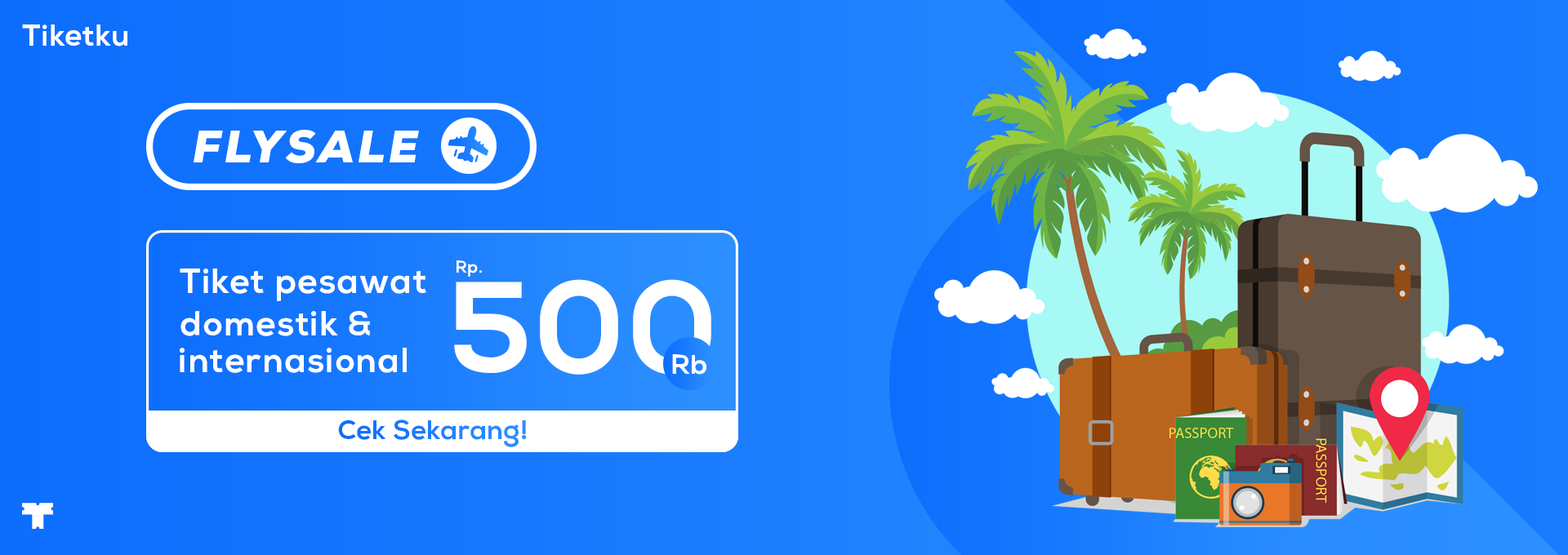
<style>
.page{position:relative;width:1568px;height:555px}
.page>*{position:absolute;margin:0}
.t1{font:30px "Nexa-XBold";letter-spacing:0.01em;color:#ffffff}
.t2{font:45px "Nexa-BlackItalic";letter-spacing:0.075em;color:#ffffff}
.t3{font:34.6px "Nexa-XBold";letter-spacing:0.025em;color:#ffffff}
.t4{font:16.7px "Nexa-XBold";letter-spacing:0.025em;color:#ffffff}
.t5{font:129px "Nexa-XBold";letter-spacing:0.01em;color:#ffffff}
.t6{font:27px "Nexa-XBold";letter-spacing:0.01em;color:#ffffff}
.t7{font:26.8px "Nexa-XBold";letter-spacing:0.01em;color:#1d7efe}
</style>
<div class="page">
<p class="t1" style="left:22px;top:24px;width:105px;height:23px">Tiketku</p>
<p class="t2" style="left:194px;top:130px;width:225px;height:33px">FLYSALE</p>
<p class="t3" style="left:180px;top:269px;width:246px;height:32px">Tiket pesawat</p>
<p class="t4" style="left:457px;top:261px;width:25px;height:16px">Rp.</p>
<p class="t5" style="left:454px;top:279px;width:257px;height:96px">500</p>
<p class="t3" style="left:180px;top:311px;width:190px;height:25px">domestik &amp;</p>
<p class="t3" style="left:180px;top:348px;width:227px;height:25px">internasional</p>
<p class="t6" style="left:672px;top:354px;width:34px;height:21px">Rb</p>
<p class="t7" style="left:338px;top:420px;width:189px;height:28px">Cek Sekarang!</p>
</div>
